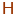
<style>
.page{position:relative;width:16px;height:16px;background:#ffffff}
.page>*{position:absolute;margin:0}
.t1{font:16.7px "ArialMT";letter-spacing:-0.1em;color:#993300}
</style>
<div class="page">
<p class="t1" style="left:3px;top:2px;width:10px;height:12px">H</p>
</div>
